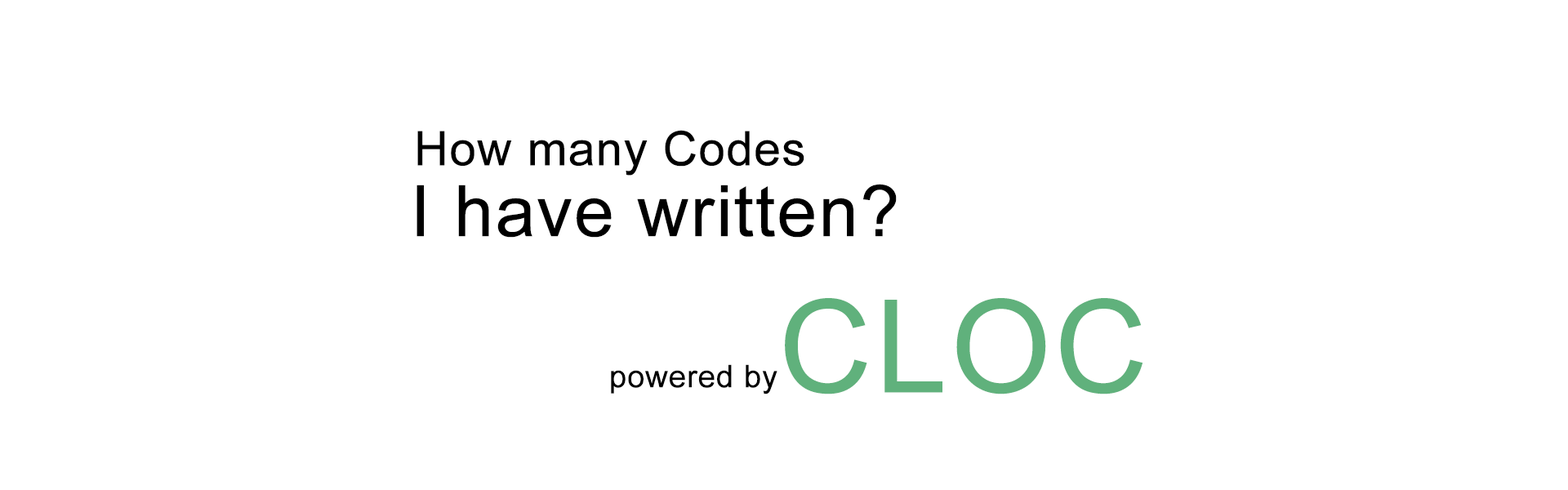
<style>
.page{position:relative;width:1568px;height:490px;background:#ffffff}
.page>*{position:absolute;margin:0}
.t1{font:47.5px "ArialMT";color:#000000;font-weight:bold}
.t2{font:71.1px "ArialMT";color:#000000;font-weight:bold}
.t3{font:129px "ArialMT";color:#60b17c;font-weight:bold}
.t4{font:31.1px "ArialMT";color:#000000;font-weight:bold}
</style>
<div class="page">
<p class="t1" style="left:417px;top:130px;width:387px;height:46px">How many Codes</p>
<p class="t2" style="left:416px;top:184px;width:481px;height:54px">I have written?</p>
<p class="t3" style="left:785px;top:298px;width:358px;height:96px">CLOC</p>
<p class="t4" style="left:611px;top:364px;width:166px;height:30px">powered by</p>
</div>
